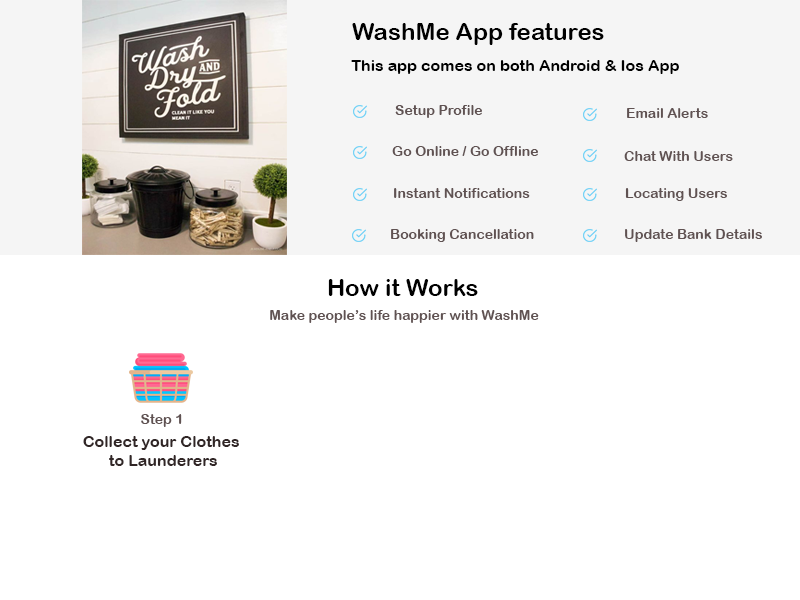
<style>
.page{position:relative;width:800px;height:600px;background:#ffffff}
.page>*{position:absolute;margin:0}
.t1{font:24px "ArialRoundedMTBold";color:#000000}
.t2{font:16px "ArialRoundedMTBold";color:#000000}
.t3{font:14px "ArialRoundedMTBold";color:#605252}
.t4{font:16px "ArialRoundedMTBold";color:#312626}
</style>
<div class="page">
<p class="t1" style="left:352px;top:23px;width:252px;height:22px">WashMe App features</p>
<p class="t2" style="left:351px;top:60px;width:328px;height:14px">This app comes on both Android &amp; Ios App</p>
<p class="t3" style="left:395px;top:105px;width:87px;height:13px">Setup Profile</p>
<p class="t3" style="left:627px;top:108px;width:81px;height:10px">Email Alerts</p>
<p class="t3" style="left:392px;top:146px;width:146px;height:10px">Go Online / Go Offline</p>
<p class="t3" style="left:624px;top:151px;width:109px;height:10px">Chat With Users</p>
<p class="t3" style="left:394px;top:188px;width:136px;height:10px">Instant Notifications</p>
<p class="t3" style="left:625px;top:188px;width:102px;height:13px">Locating Users</p>
<p class="t3" style="left:391px;top:229px;width:143px;height:13px">Booking Cancellation</p>
<p class="t3" style="left:625px;top:229px;width:137px;height:13px">Update Bank Details</p>
<p class="t1" style="left:328px;top:279px;width:150px;height:17px">How it Works</p>
<p class="t3" style="left:270px;top:310px;width:269px;height:13px">Make people’s life happier with WashMe</p>
<p class="t3" style="left:141px;top:414px;width:41px;height:13px">Step 1</p>
<p class="t4" style="left:83px;top:436px;width:156px;height:30px;text-align:center">Collect your Clothes <br>to Launderers</p>
</div>
